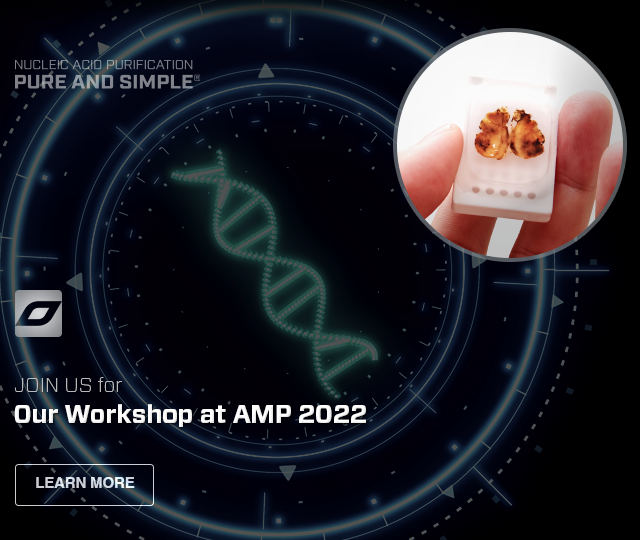
<style>
.page{position:relative;width:640px;height:540px}
.page>*{position:absolute;margin:0}
.t1{font:20px "Forza-Thin";color:#b8b8ba;text-transform:uppercase}
.t2{font:20px "Forza-Thin";color:#b8b8ba}
.t3{font:26px "Forza-Bold";letter-spacing:-0.008em;color:#fefefe}
.t4{font:15px "Helvetica-Bold";letter-spacing:-0.01em;color:#d1d7e4;text-transform:uppercase}
</style>
<div class="page">
<p class="t1" style="left:14px;top:377px;width:108px;height:15px">Join us<span class="t2"> for</span></p>
<p class="t3" style="left:14px;top:404px;width:352px;height:23px">Our Workshop at AMP 2022</p>
<p class="t4" style="left:36px;top:477px;width:99px;height:11px">Learn More</p>
</div>
